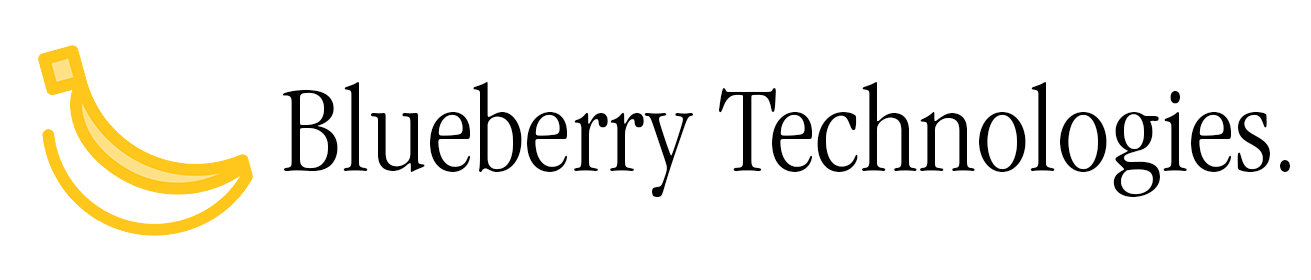
<style>
.page{position:relative;width:1311px;height:280px;background:#ffffff}
.page>*{position:absolute;margin:0}
.t1{font:125px "ITCGaramondStd-LtNarrow";color:#000000}
</style>
<div class="page">
<p class="t1" style="left:282px;top:82px;width:1008px;height:116px">Blueberry Technologies.</p>
</div>
